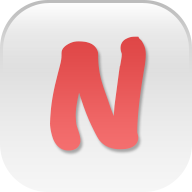
<style>
.page{position:relative;width:192px;height:192px}
.page>*{position:absolute;margin:0}
.t1{font:122.5px "VarianeScript";color:#e95454;font-weight:bold;scale:1.47 1}
</style>
<div class="page">
<p class="t1" style="left:50px;top:36px;width:96px;height:115px">N</p>
</div>
